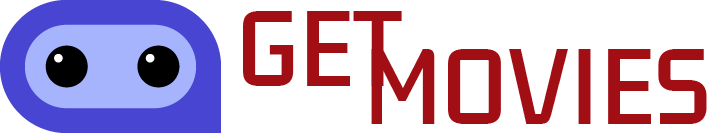
<style>
.page{position:relative;width:713px;height:133px;background:#ffffff}
.page>*{position:absolute;margin:0}
.t1{font:93.8px "KdamThmorPro-Regular";color:#a10f15}
</style>
<div class="page">
<p class="t1" style="left:243px;top:11px;width:159px;height:75px">GET</p>
<p class="t1" style="left:371px;top:49px;width:336px;height:75px">MOVIES</p>
</div>
